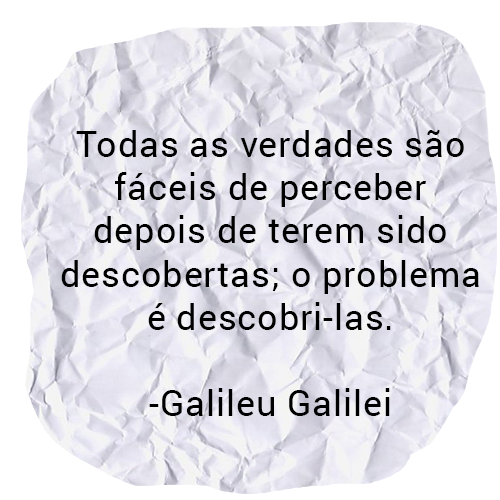
<style>
.page{position:relative;width:500px;height:500px;background:#ffffff}
.page>*{position:absolute;margin:0}
.t1{font:36px "Roboto-Regular";letter-spacing:0.025em;color:#000000}
</style>
<div class="page">
<p class="t1" style="left:61px;top:129px;width:418px;height:287px;text-align:center">Todas as verdades são fáceis de perceber depois de terem sido descobertas; o problema é descobri-las.<br><br>-Galileu Galilei</p>
</div>
